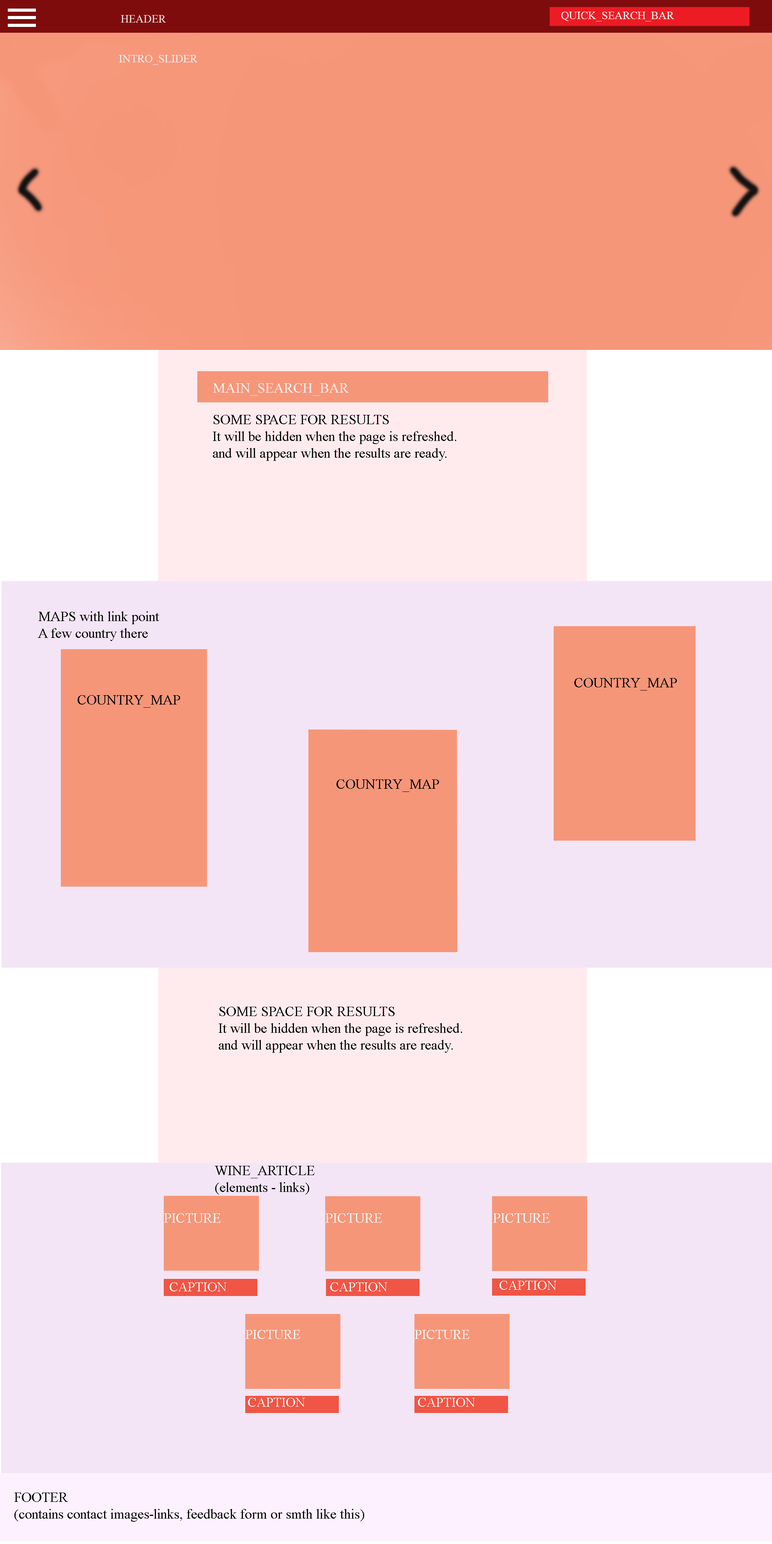
<style>
.page{position:relative;width:772px;height:1544px;background:#f3e5f5}
.page>*{position:absolute;margin:0}
.t1{font:11.1px "TimesNewRomanPSMT";color:#fef9f9}
.t2{font:11.1px "TimesNewRomanPSMT";color:#f7efef}
.t3{font:14px "TimesNewRomanPSMT";color:#f7efef}
.t4{font:14px "TimesNewRomanPSMT";color:#050505}
.t5{font:14px "TimesNewRomanPSMT";color:#fbfafa}
.t6{font:13.3px "TimesNewRomanPSMT";color:#fbfafa}
</style>
<div class="page">
<p class="t1" style="left:561px;top:12px;width:113px;height:9px">QUIСK_SEARCH_BAR</p>
<p class="t2" style="left:119px;top:55px;width:79px;height:10px">INTRO_SLIDER</p>
<p class="t3" style="left:213px;top:383px;width:136px;height:13px">MAIN_SEARCH_BAR</p>
<p class="t4" style="left:213px;top:415px;width:243px;height:46px;text-align:right">SOME SPACE FOR RESULTS<br>It will be hidden when the page is refreshed. <br>and will appear when the results are ready.</p>
<p class="t4" style="left:38px;top:611px;width:121px;height:30px;text-align:right">MAPS with link point<br>A few country there</p>
<p class="t4" style="left:574px;top:678px;width:103px;height:13px">COUNTRY_MAP</p>
<p class="t4" style="left:78px;top:695px;width:102px;height:13px">COUNTRY_MAP</p>
<p class="t4" style="left:337px;top:780px;width:102px;height:12px">COUNTRY_MAP</p>
<p class="t4" style="left:219px;top:1007px;width:243px;height:46px;text-align:right">SOME SPACE FOR RESULTS<br>It will be hidden when the page is refreshed. <br>and will appear when the results are ready.</p>
<p class="t4" style="left:215px;top:1166px;width:100px;height:29px;text-align:right">WINE_ARTICLE <br>(elements - links)</p>
<p class="t5" style="left:164px;top:1214px;width:57px;height:9px">PICTURE</p>
<p class="t5" style="left:326px;top:1214px;width:56px;height:9px">PICTURE</p>
<p class="t5" style="left:493px;top:1214px;width:57px;height:9px">PICTURE</p>
<p class="t6" style="left:170px;top:1283px;width:57px;height:9px">CAPTION</p>
<p class="t6" style="left:330px;top:1283px;width:57px;height:9px">CAPTION</p>
<p class="t6" style="left:500px;top:1281px;width:56px;height:9px">CAPTION</p>
<p class="t6" style="left:246px;top:1330px;width:54px;height:9px">PICTURE</p>
<p class="t6" style="left:415px;top:1330px;width:55px;height:9px">PICTURE</p>
<p class="t6" style="left:248px;top:1398px;width:57px;height:9px">CAPTION</p>
<p class="t6" style="left:418px;top:1398px;width:57px;height:9px">CAPTION</p>
<p class="t4" style="left:14px;top:1493px;width:350px;height:29px;text-align:right">FOOTER<br> (contains contact images-links, feedback form or smth like this)</p>
</div>
